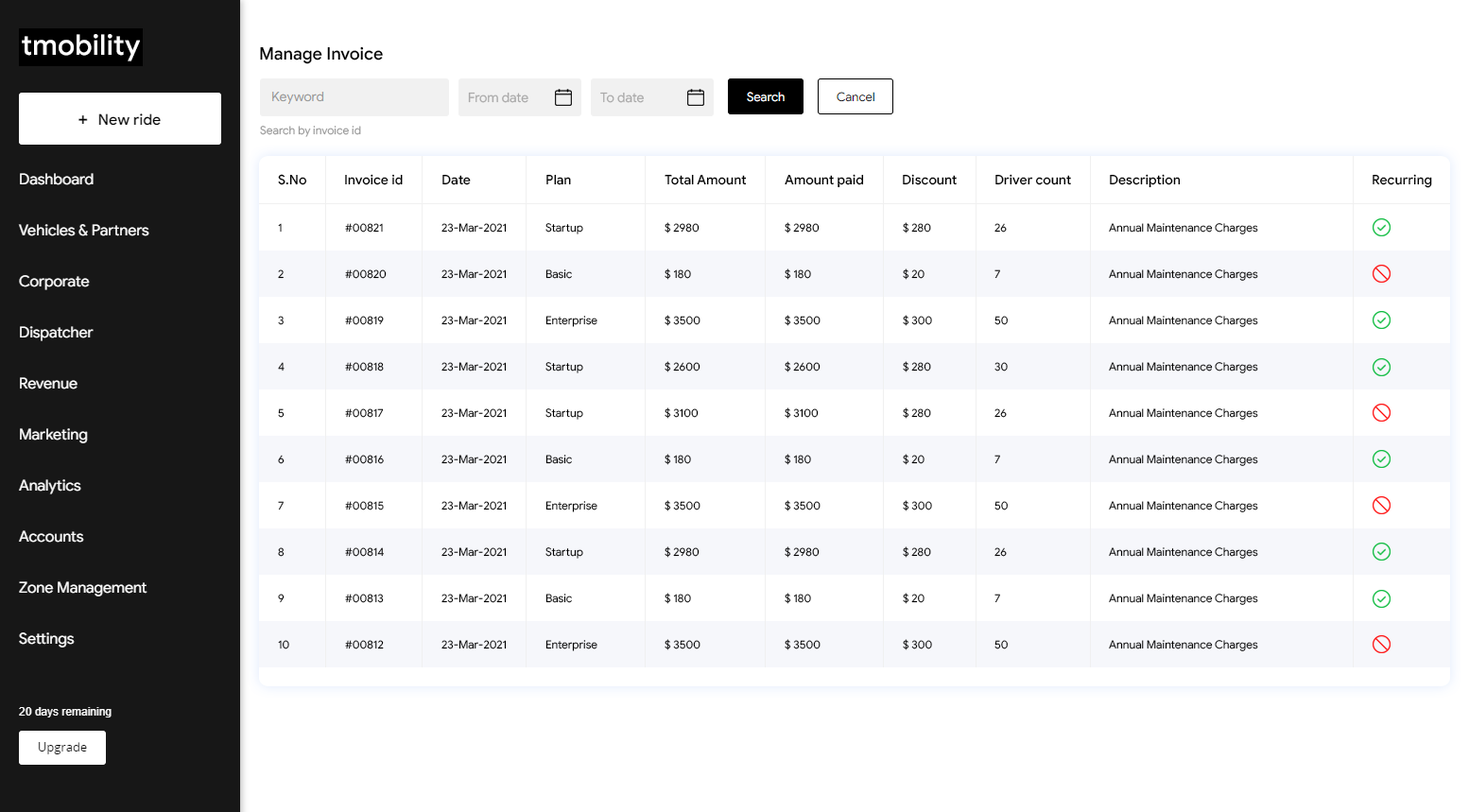
<style>
.page{position:relative;width:1469px;height:812px;background:#ffffff}
.page>*{position:absolute;margin:0}
.t1{font:17px "GoogleSans-Medium";color:#000000}
.t2{font:13.2px "GoogleSans-Regular";color:#aaa9a9}
.t3{font:11.3px "GoogleSans-Regular";color:#999999}
.t4{font:13.2px "GoogleSans-Medium";color:#000000}
.t5{font:11.3px/46.3px "GoogleSans-Regular";color:#000000}
</style>
<div class="page">
<p class="t1" style="left:260px;top:46px;width:123px;height:18px">Manage Invoice</p>
<p class="t2" style="left:468px;top:92px;width:60px;height:11px">From date</p>
<p class="t2" style="left:600px;top:92px;width:45px;height:11px">To date</p>
<p class="t3" style="left:260px;top:126px;width:101px;height:11px">Search by invoice id</p>
<p class="t4" style="left:278px;top:174px;width:29px;height:11px">S.No</p>
<p class="t4" style="left:345px;top:174px;width:58px;height:11px">Invoice id</p>
<p class="t4" style="left:442px;top:174px;width:29px;height:11px">Date</p>
<p class="t4" style="left:546px;top:174px;width:25px;height:11px">Plan</p>
<p class="t4" style="left:664px;top:174px;width:83px;height:11px">Total Amount</p>
<p class="t4" style="left:784px;top:174px;width:80px;height:14px">Amount paid</p>
<p class="t4" style="left:903px;top:174px;width:53px;height:11px">Discount</p>
<p class="t4" style="left:995px;top:174px;width:76px;height:11px">Driver count</p>
<p class="t4" style="left:1110px;top:174px;width:70px;height:14px">Description</p>
<p class="t4" style="left:1372px;top:174px;width:60px;height:14px">Recurring</p>
<p class="t5" style="left:278px;top:223px;width:11px;height:426px">1<br>2<br>3<br>4<br>5<br>6<br>7<br>8<br>9<br>10</p>
<p class="t5" style="left:345px;top:223px;width:42px;height:426px">#00821<br>#00820<br>#00819<br>#00818<br>#00817<br>#00816<br>#00815<br>#00814<br>#00813<br>#00812</p>
<p class="t5" style="left:441px;top:223px;width:66px;height:426px">23-Mar-2021<br>23-Mar-2021<br>23-Mar-2021<br>23-Mar-2021<br>23-Mar-2021<br>23-Mar-2021<br>23-Mar-2021<br>23-Mar-2021<br>23-Mar-2021<br>23-Mar-2021</p>
<p class="t5" style="left:545px;top:223px;width:52px;height:428px">Startup<br>Basic<br>Enterprise<br>Startup<br>Startup<br>Basic<br>Enterprise<br>Startup<br>Basic<br>Enterprise</p>
<p class="t5" style="left:664px;top:222px;width:36px;height:428px">$ 2980<br>$ 180<br>$ 3500<br>$ 2600<br>$ 3100<br>$ 180<br>$ 3500<br>$ 2980<br>$ 180<br>$ 3500</p>
<p class="t5" style="left:784px;top:222px;width:36px;height:428px">$ 2980<br>$ 180<br>$ 3500<br>$ 2600<br>$ 3100<br>$ 180<br>$ 3500<br>$ 2980<br>$ 180<br>$ 3500</p>
<p class="t5" style="left:903px;top:222px;width:29px;height:428px">$ 280<br>$ 20<br>$ 300<br>$ 280<br>$ 280<br>$ 20<br>$ 300<br>$ 280<br>$ 20<br>$ 300</p>
<p class="t5" style="left:994px;top:223px;width:14px;height:426px">26<br>7<br>50<br>30<br>26<br>7<br>50<br>26<br>7<br>50</p>
<p class="t5" style="left:1109px;top:223px;width:149px;height:428px">Annual Maintenance Charges<br>Annual Maintenance Charges<br>Annual Maintenance Charges<br>Annual Maintenance Charges<br>Annual Maintenance Charges<br>Annual Maintenance Charges<br>Annual Maintenance Charges<br>Annual Maintenance Charges<br>Annual Maintenance Charges<br>Annual Maintenance Charges</p>
</div>
